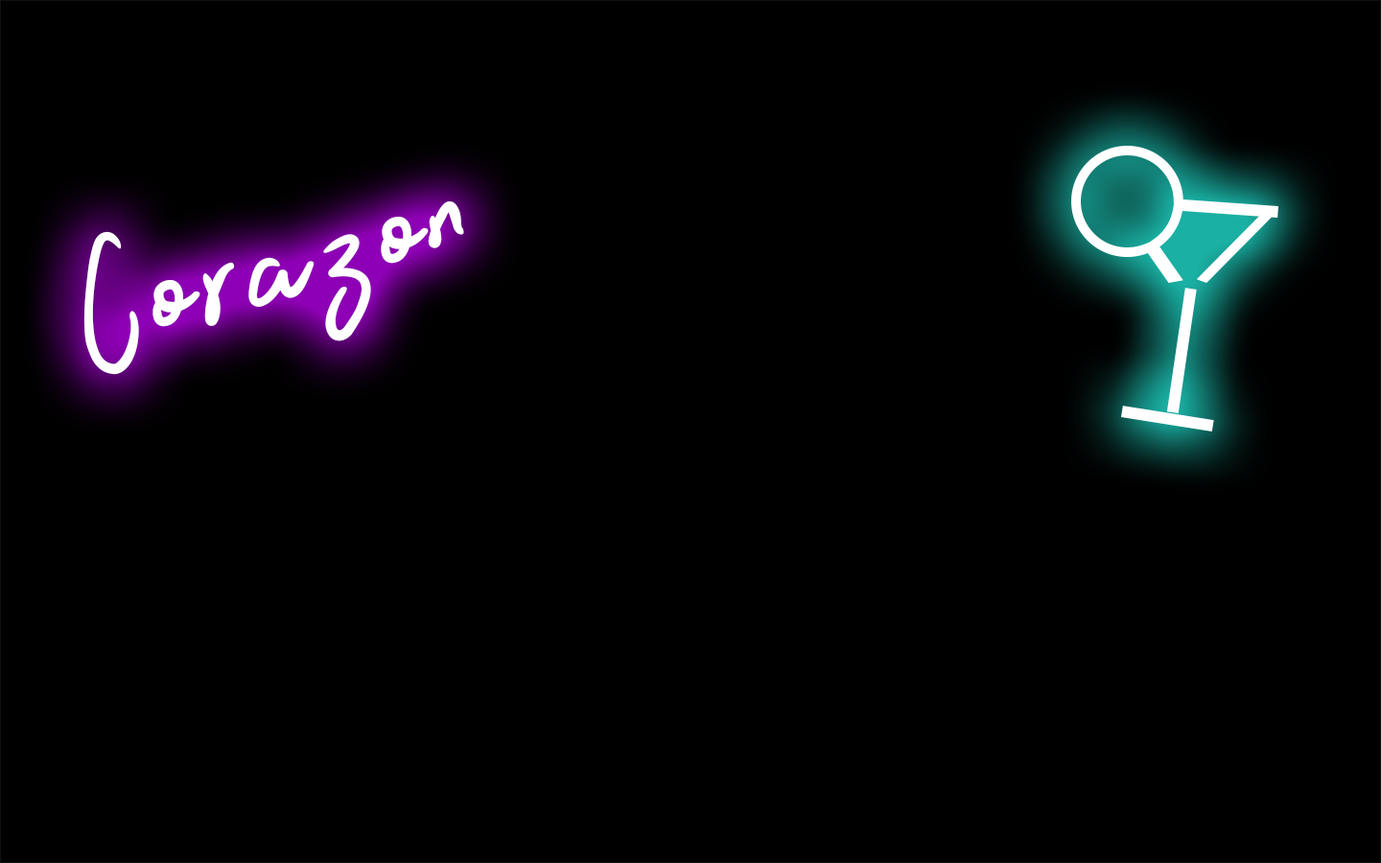
<style>
.page{position:relative;width:1381px;height:863px;background:#000000}
.page>*{position:absolute;margin:0}
.t1{font:167.9px "KhalidPersonalRegular";letter-spacing:0.075em;color:#ffffff}
</style>
<div class="page">
<p class="t1" style="left:83px;top:201px;width:381px;height:174px;rotate:-16deg">Corazón</p>
</div>
